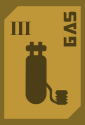
<style>
.page{position:relative;width:85px;height:125px;background:#bf9739}
.page>*{position:absolute;margin:0}
.t1{font:20px "TransformersMovie";letter-spacing:0.04em;color:#4c3f17}
.t2{font:20px "TimesNewRomanPS-BoldMT";letter-spacing:-0.04em;color:#4c3f17}
</style>
<div class="page">
<p class="t1" style="left:63px;top:11px;width:14px;height:36px;rotate:-90deg">Gas</p>
<p class="t2" style="left:10px;top:21px;width:21px;height:14px">III</p>
</div>
